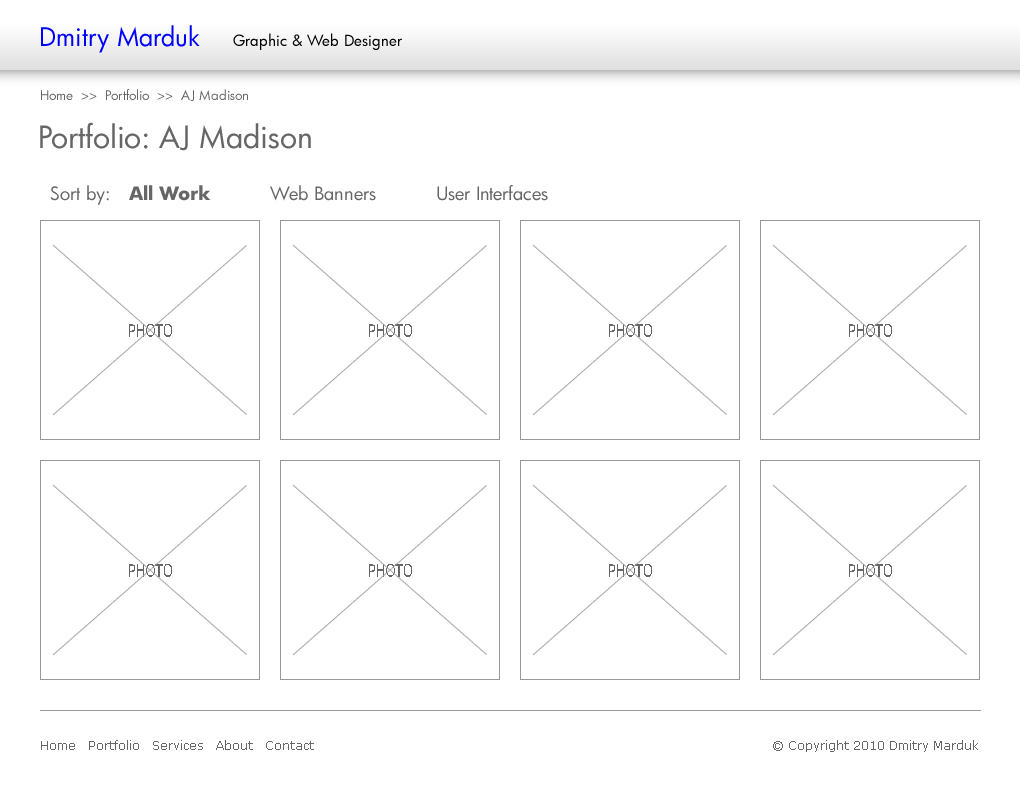
<style>
.page{position:relative;width:1020px;height:791px;background:#ffffff}
.page>*{position:absolute;margin:0}
.t1{font:25px "FuturaBk";color:#0000ff}
.t2{font:15px "FuturaBk";color:#000000}
.t3{font:13px "FuturaBk";color:#666666}
.t4{font:30px "FuturaBk";color:#666666}
.t5{font:18px "FuturaBk";color:#666666}
.t6{font:18px "FuturaBk-Bold";color:#666666}
</style>
<div class="page">
<p class="t1" style="left:41px;top:25px;width:159px;height:28px">Dmitry Marduk</p>
<p class="t2" style="left:233px;top:33px;width:169px;height:17px">Graphic &amp; Web Designer</p>
<p class="t3" style="left:41px;top:89px;width:207px;height:12px">Home  &gt;&gt;  Portfolio  &gt;&gt;  AJ Madison</p>
<p class="t4" style="left:40px;top:122px;width:271px;height:29px">Portfolio: AJ Madison</p>
<p class="t5" style="left:50px;top:185px;width:498px;height:20px">Sort by:   <span class="t6">All Work</span>          Web Banners          User Interfaces</p>
</div>
